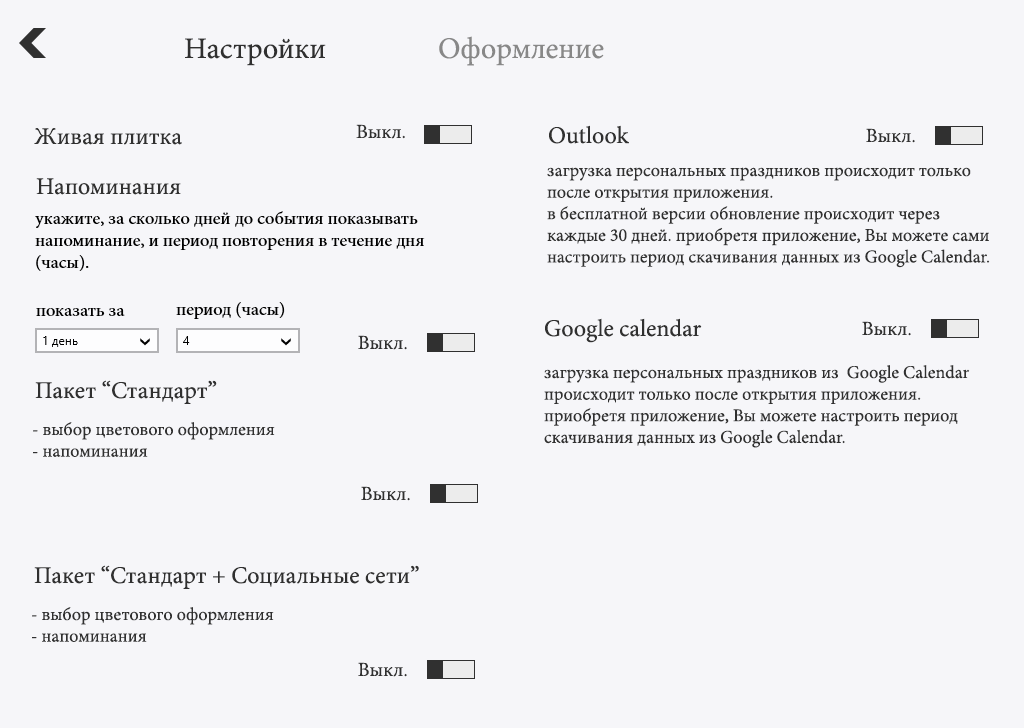
<style>
.page{position:relative;width:1024px;height:728px;background:#f6f6f9}
.page>*{position:absolute;margin:0}
.t1{font:30px "MinionPro-Regular";color:#303030}
.t2{font:30px "MinionPro-Regular";color:#888888}
.t3{font:20px "MinionPro-Regular";color:#303030}
.t4{font:24px "MinionPro-Regular";color:#303030}
.t5{font:18px "MinionPro-Regular";color:#303030}
</style>
<div class="page">
<p class="t1" style="left:185px;top:38px;width:141px;height:28px">Настройки</p>
<p class="t2" style="left:439px;top:36px;width:165px;height:30px">Оформление</p>
<p class="t3" style="left:356px;top:124px;width:49px;height:15px">Выкл.</p>
<p class="t4" style="left:549px;top:125px;width:80px;height:19px">Outlook</p>
<p class="t4" style="left:34px;top:128px;width:148px;height:17px">Живая плитка</p>
<p class="t3" style="left:866px;top:128px;width:49px;height:15px">Выкл.</p>
<p class="t5" style="left:547px;top:167px;width:443px;height:101px">загрузка персональных праздников происходит только<br>после открытия приложения.<br>в бесплатной версии обновление происходит через<br>каждые 30 дней. приобретя приложение, Вы можете сами <br>настроить период скачивания данных из Google Calendar.</p>
<p class="t4" style="left:36px;top:178px;width:145px;height:17px">Напоминания</p>
<p class="t4" style="left:545px;top:318px;width:157px;height:25px">Google calendar</p>
<p class="t3" style="left:862px;top:321px;width:49px;height:15px">Выкл.</p>
<p class="t3" style="left:358px;top:335px;width:49px;height:15px">Выкл.</p>
<p class="t5" style="left:544px;top:365px;width:426px;height:83px">загрузка персональных праздников из  Google Calendar <br>происходит только после открытия приложения. <br>приобретя приложение, Вы можете настроить период <br>скачивания данных из Google Calendar.</p>
<p class="t4" style="left:35px;top:380px;width:182px;height:24px">Пакет “Стандарт”</p>
<p class="t5" style="left:33px;top:422px;width:242px;height:35px">- выбор цветового оформления<br>- напоминания</p>
<p class="t3" style="left:361px;top:486px;width:49px;height:15px">Выкл.</p>
<p class="t4" style="left:34px;top:565px;width:385px;height:24px">Пакет “Стандарт + Cоциальные сети”</p>
<p class="t5" style="left:32px;top:607px;width:242px;height:35px">- выбор цветового оформления<br>- напоминания</p>
<p class="t3" style="left:358px;top:662px;width:49px;height:15px">Выкл.</p>
</div>
